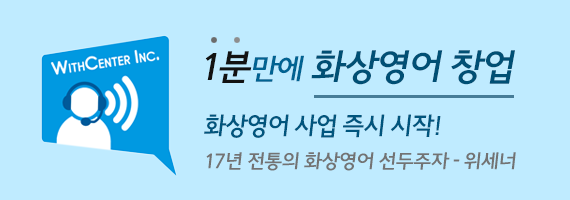
<style>
.page{position:relative;width:570px;height:200px;background:#bfebff}
.page>*{position:absolute;margin:0}
.t1{font:36.7px "JejuGothicOTF";letter-spacing:-0.05em;color:#004f74}
.t2{font:36.7px "JejuGothicOTF";letter-spacing:-0.05em;color:#121212}
.t3{font:29.6px "JejuGothicOTF";letter-spacing:-0.05em;color:#006392}
.t4{font:25.2px "JejuGothicOTF";letter-spacing:-0.05em;color:#00557d;scale:0.97 1}
.t5{font:19.6px "JejuGothicOTF";letter-spacing:-0.05em;color:#737373}
</style>
<div class="page">
<p class="t1" style="left:205px;top:50px;width:310px;height:35px"><span class="t2">1분</span><span class="t3">만에 </span>화상영어 창업</p>
<p class="t4" style="left:204px;top:114px;width:237px;height:24px">화상영어 사업 즉시 시작!</p>
<p class="t5" style="left:206px;top:152px;width:310px;height:19px">17년 전통의 화상영어 선두주자 - 위세너</p>
</div>
